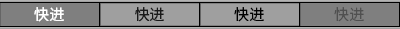
<style>
.page{position:relative;width:400px;height:29px;background:#7f7f7f}
.page>*{position:absolute;margin:0}
.t1{font:15px "SourceHanSansSC-Normal";color:#ffffff}
.t2{font:15px "SourceHanSansSC-Normal";color:#191919}
.t3{font:15px "SourceHanSansSC-Normal";color:#000000}
.t4{font:15px "SourceHanSansSC-Normal";color:#505050}
</style>
<div class="page">
<p class="t1" style="left:34px;top:7px;width:30px;height:15px">快进</p>
<p class="t2" style="left:135px;top:7px;width:29px;height:15px">快进</p>
<p class="t3" style="left:234px;top:7px;width:30px;height:15px">快进</p>
<p class="t4" style="left:334px;top:7px;width:30px;height:15px">快进</p>
</div>
